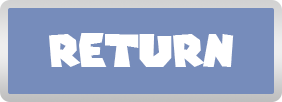
<style>
.page{position:relative;width:282px;height:102px;background:#768cbb}
.page>*{position:absolute;margin:0}
.t1{font:44.7px "SuperMarioGalaxy";color:#ffffff}
</style>
<div class="page">
<p class="t1" style="left:49px;top:33px;width:185px;height:34px">RETURN</p>
</div>
